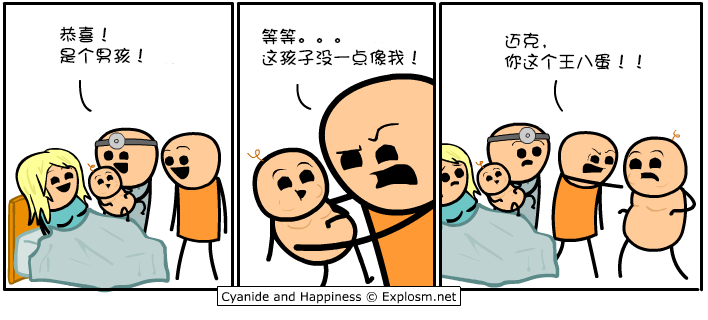
<style>
.page{position:relative;width:708px;height:320px;background:#ffffff}
.page>*{position:absolute;margin:0}
.t1{font:18px/21px "DFPShaoNvW5";color:#000000}
</style>
<div class="page">
<p class="t1" style="left:60px;top:26px;width:83px;height:38px">恭喜！<br>是个男孩！</p>
<p class="t1" style="left:262px;top:28px;width:155px;height:38px">等等。。。<br>这孩子没一点像我！</p>
<p class="t1" style="left:504px;top:32px;width:138px;height:38px">迈克，<br>你这个王八蛋！！</p>
</div>
